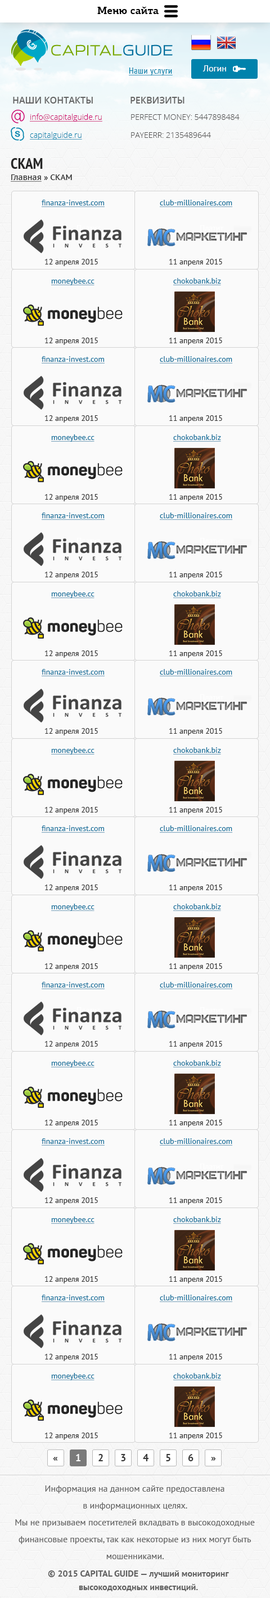
<style>
.page{position:relative;width:270px;height:1598px;background:#fafafa}
.page>*{position:absolute;margin:0}
.t1{font:10.1px "PFCentroSlabPro-Bold";color:#000000}
.t2{font:9px "PTSans-Regular";color:#ffffff}
.t3{font:9px "PTSans-Narrow";letter-spacing:0.04em;color:#0082ac;text-decoration:underline}
.t4{font:9px "OpenSans-Semibold";color:#656565;text-transform:uppercase}
.t5{font:7.9px "OpenSans-Light";color:#cb0069;text-decoration:underline}
.t6{font:7.9px "OpenSans-Light";color:#545454}
.t7{font:7.9px "OpenSans-Light";color:#0082ac;text-decoration:underline}
.t8{font:15.2px "PTSans-NarrowBold";color:#262626;text-transform:uppercase}
.t9{font:7.9px "PTSans-Caption";color:#262626;text-decoration:underline}
.t10{font:7.9px "PTSans-Caption";color:#262626}
.t11{font:7.9px "PTSans-Regular";color:#0e6e9a;text-decoration:underline}
.t12{font:7.9px "PTSans-Regular";color:#2f2f2f}
.t13{font:10.1px "PTSans-Bold";color:#383838}
.t14{font:10.1px "PTSans-Bold";color:#ffffff}
.t15{font:9px/16.9px "PTSans-Regular";color:#616161}
.t16{font:9px/13.5px "PTSans-Bold";color:#616161}
</style>
<div class="page">
<p class="t1" style="left:97px;top:6px;width:62px;height:8px">Меню сайта</p>
<p class="t2" style="left:202px;top:65px;width:24px;height:6px">Логин</p>
<p class="t3" style="left:129px;top:68px;width:44px;height:7px">Наши услуги</p>
<p class="t4" style="left:13px;top:97px;width:80px;height:7px">Наши контакты</p>
<p class="t4" style="left:130px;top:97px;width:54px;height:7px">Реквизиты</p>
<p class="t5" style="left:30px;top:114px;width:72px;height:8px">info@capitalguide.ru</p>
<p class="t6" style="left:131px;top:114px;width:109px;height:6px">PERFECT MONEY: 5447898484</p>
<p class="t7" style="left:30px;top:132px;width:52px;height:8px">capitalguide.ru</p>
<p class="t6" style="left:131px;top:132px;width:80px;height:6px">PAYEERR: 2135489644</p>
<p class="t8" style="left:11px;top:158px;width:32px;height:11px">СКАМ</p>
<p class="t9" style="left:11px;top:174px;width:61px;height:8px">Главная<span class="t10"> » СКАМ</span></p>
<p class="t11" style="left:42px;top:200px;width:63px;height:7px">finanza-invest.com</p>
<p class="t11" style="left:160px;top:200px;width:73px;height:7px">club-millionaires.com</p>
<p class="t12" style="left:44px;top:259px;width:54px;height:7px">12 апреля 2015</p>
<p class="t12" style="left:169px;top:259px;width:53px;height:7px">11 апреля 2015</p>
<p class="t11" style="left:51px;top:278px;width:43px;height:7px">moneybee.cc</p>
<p class="t11" style="left:173px;top:278px;width:48px;height:7px">chokobank.biz</p>
<p class="t12" style="left:44px;top:338px;width:54px;height:7px">12 апреля 2015</p>
<p class="t12" style="left:169px;top:338px;width:53px;height:7px">11 апреля 2015</p>
<p class="t13" style="left:53px;top:1456px;width:5px;height:4px">«</p>
<p class="t14" style="left:76px;top:1454px;width:4px;height:7px">1</p>
<p class="t13" style="left:98px;top:1454px;width:5px;height:7px">2</p>
<p class="t13" style="left:121px;top:1454px;width:4px;height:7px">3</p>
<p class="t13" style="left:143px;top:1454px;width:5px;height:7px">4</p>
<p class="t13" style="left:166px;top:1454px;width:4px;height:7px">5</p>
<p class="t13" style="left:188px;top:1454px;width:6px;height:7px">6</p>
<p class="t13" style="left:211px;top:1456px;width:5px;height:4px">»</p>
<p class="t15" style="left:15px;top:1485px;width:240px;height:74px;text-align:center">Информация на данном сайте предоставлена <br>в информационных целях.<br>Мы не призываем посетителей вкладвать в высокодоходные финансовые проекты, так как некоторые из них могут быть мошенниками.<br>CapitalGuide не несёт ответственности за действия администрации проектов, представленных на этом сайте.</p>
<p class="t16" style="left:48px;top:1570px;width:181px;height:21px;text-align:center">© 2015 CAPITAL GUIDE — лучший мониторинг <br>высокодоходных инвестиций.</p>
</div>
